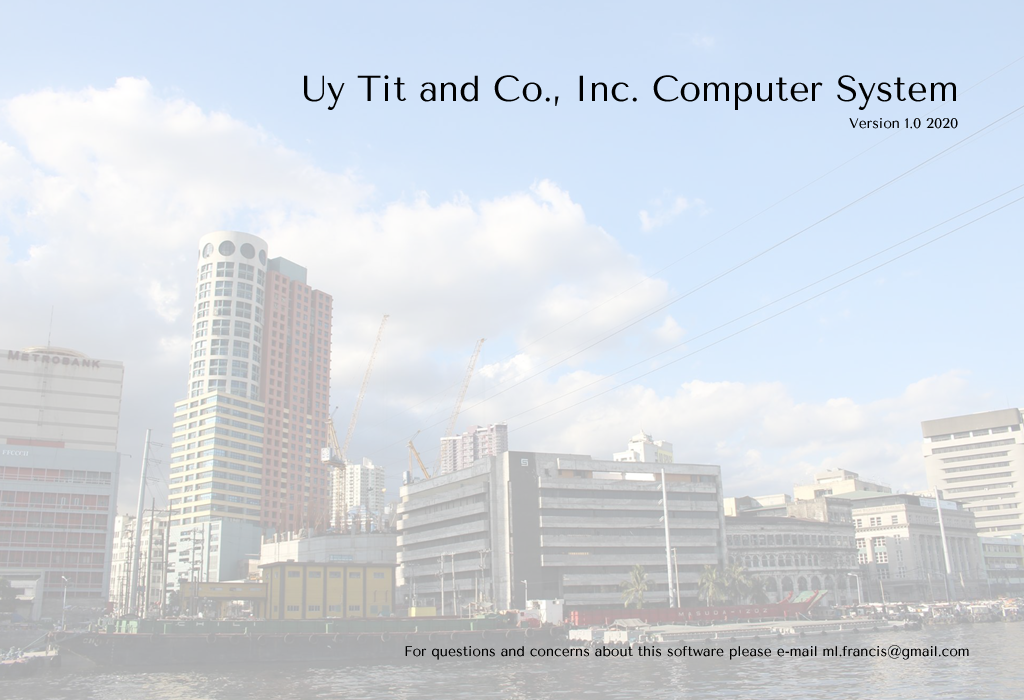
<style>
.page{position:relative;width:1024px;height:700px}
.page>*{position:absolute;margin:0}
.t1{font:36px "TenorSans";color:#000000}
.t2{font:14px "TenorSans";color:#000000}
</style>
<div class="page">
<p class="t1" style="left:304px;top:75px;width:652px;height:35px">Uy Tit and Co., Inc. Computer System</p>
<p class="t2" style="left:849px;top:118px;width:109px;height:11px">Version 1.0 2020</p>
<p class="t2" style="left:405px;top:645px;width:564px;height:15px">For questions and concerns about this software please e-mail ml.francis@gmail.com</p>
</div>
